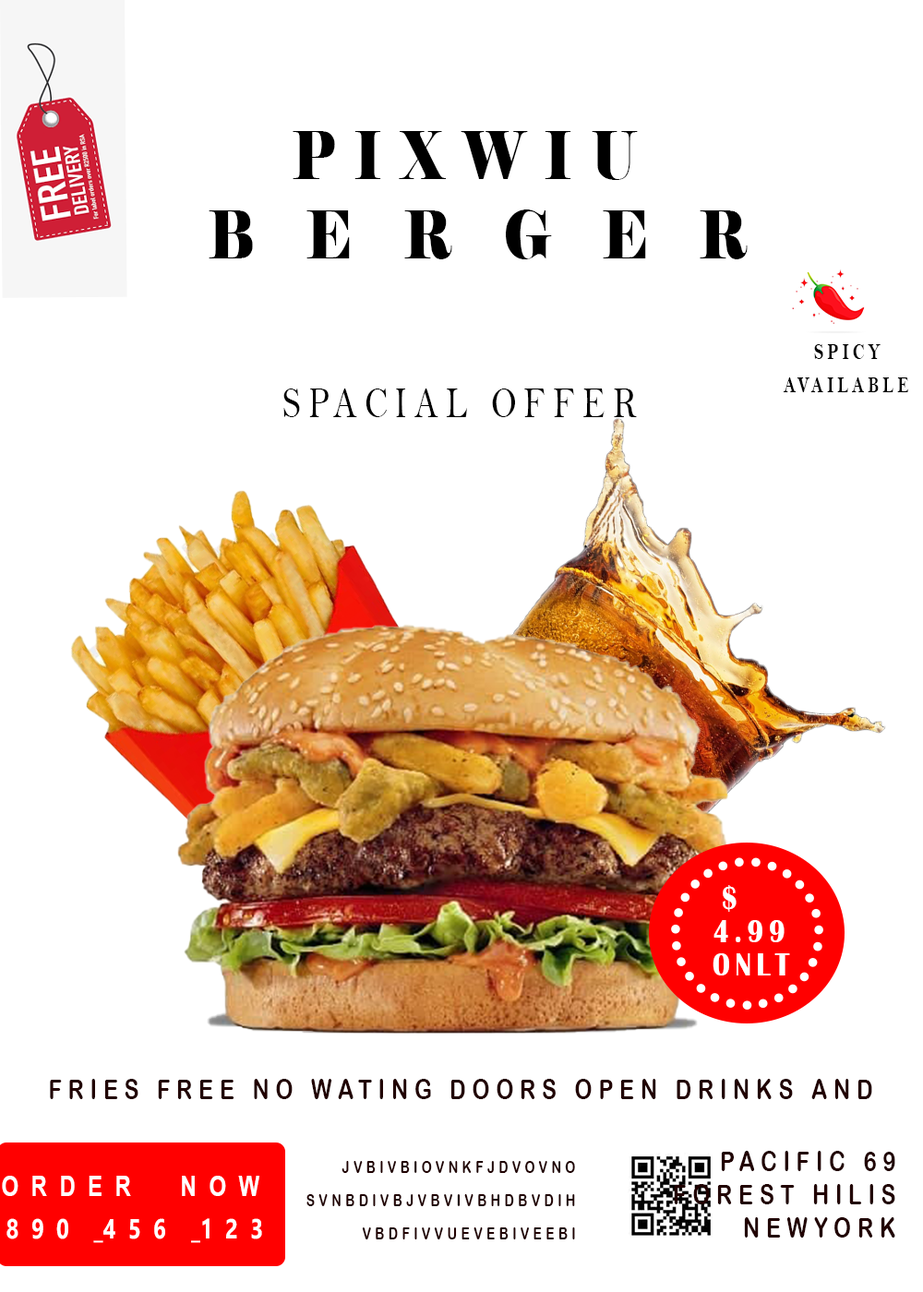
<style>
.page{position:relative;width:923px;height:1292px;background:#ffffff}
.page>*{position:absolute;margin:0}
.t1{font:66.4px "Elephant-Regular";letter-spacing:0.36em;color:#000000;scale:0.8 1}
.t2{font:66.4px "Elephant-Regular";letter-spacing:0.96em;color:#000000;scale:0.8 1}
.t3{font:22.1px/33.2px "BellMTBold";letter-spacing:0.2em;color:#000000;scale:0.8 1}
.t4{font:44.3px "BellMT";letter-spacing:0.2em;color:#000000;scale:0.8 1}
.t5{font:33.2px/33.2px "BritannicBold";letter-spacing:0.2em;color:#ffffff;scale:0.8 1}
.t6{font:27.7px "ArialRoundedMTBold";letter-spacing:0.28em;color:#210101;scale:0.8 1}
.t7{font:27.7px/33.2px "ArialRoundedMTBold";letter-spacing:0.28em;color:#210101;scale:0.8 1}
.t8{font:16.6px/33.2px "ArialRoundedMTBold";letter-spacing:0.28em;color:#210101;scale:0.8 1}
.t9{font:27.7px "Arial-BoldMT";letter-spacing:0.56em;color:#ffffff;scale:0.8 1}
</style>
<div class="page">
<p class="t1" style="left:293px;top:131px;width:345px;height:49px">PIXWIU</p>
<p class="t2" style="left:209px;top:209px;width:539px;height:50px">BERGER</p>
<p class="t3" style="left:784px;top:344px;width:125px;height:48px">SPICY <br>AVAILABLE</p>
<p class="t4" style="left:283px;top:389px;width:354px;height:28px">SPACIAL OFFER</p>
<p class="t5" style="left:712px;top:885px;width:78px;height:91px">$ 4.99<br>ONLT</p>
<p class="t6" style="left:50px;top:1079px;width:822px;height:20px">FRIES FREE NO WATING DOORS OPEN DRINKS AND</p>
<p class="t7" style="left:674px;top:1151px;width:221px;height:87px">69 PACIFIC<br>FOREST HILIS       <br>NEWYORK</p>
<p class="t8" style="left:306px;top:1161px;width:269px;height:78px">JVBIVBIOVNKFJDVOVNO<br>SVNBDIVBJVBVIVBHDBVDIH<br>VBDFIVVUEVEBIVEEBI</p>
<p class="t9" style="left:2px;top:1176px;width:257px;height:20px">ORDER  NOW</p>
</div>
